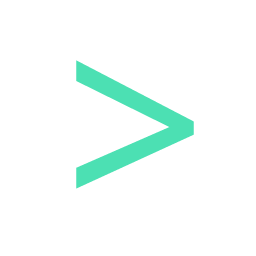
<style>
.page{position:relative;width:256px;height:256px;background:#ffffff}
.page>*{position:absolute;margin:0}
.t1{font:260px "NotoSans";color:#4ce0b3}
</style>
<div class="page">
<p class="t1" style="left:76px;top:60px;width:118px;height:129px">&gt;</p>
</div>
